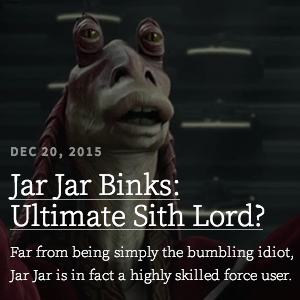
<style>
.page{position:relative;width:300px;height:300px}
.page>*{position:absolute;margin:0}
.t1{font:13px "SourceSansPro-Semibold";letter-spacing:0.12em;color:#8f8f8f;text-transform:uppercase}
.t2{font:15px/23px "SourceSerifPro-ExtraLight";color:#ffffff}
.t3{font:30px/31px "SourceSerifPro-Light";color:#ffffff}
.t4{font:15px/31px "SourceSerifPro-ExtraLight";color:#ffffff}
</style>
<div class="page">
<p class="t1" style="left:11px;top:146px;width:90px;height:13px">Dec 20, 2015</p>
<p class="t2" style="left:8px;top:172px;width:285px;height:112px"><span class="t3">Jar Jar Binks: Ultimate Sith Lord?<br></span><span class="t4">Far from being simply the </span>bumbling idiot, Jar Jar is in fact a highly skilled force user.</p>
</div>
